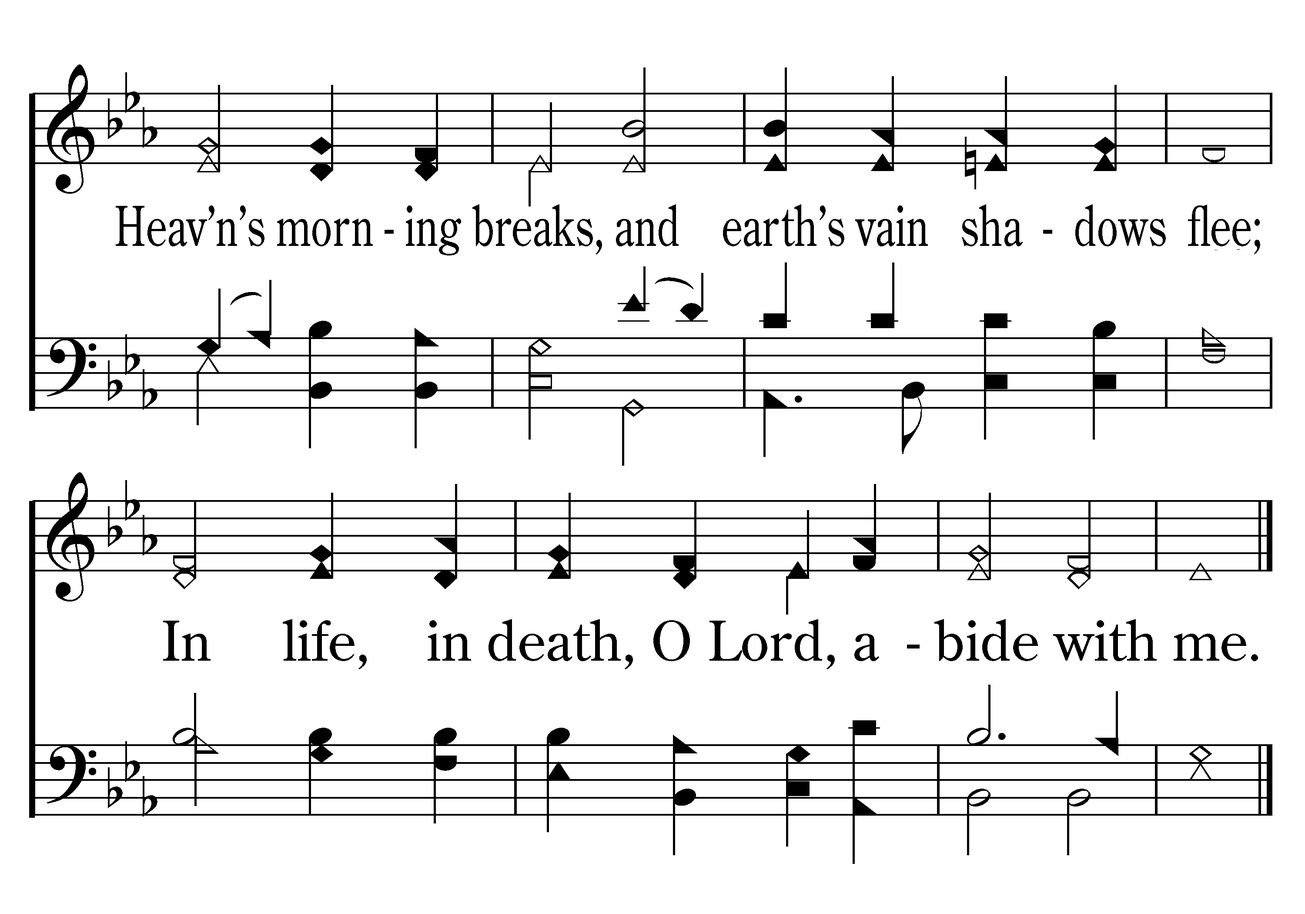
<style>
.page{position:relative;width:1305px;height:914px;background:#ffffff}
.page>*{position:absolute;margin:0}
.t1{font:54.4px "CenturyOldStyleStd-Regular";color:#000000;scale:0.76 1}
.t2{font:54.4px "CenturyOldStyleStd-Regular";color:#000000;scale:1.03 1}
</style>
<div class="page">
<p class="t1" style="left:116px;top:204px;width:1144px;height:51px">Heav’n’s morn - ing breaks, and    earth’s vain   sha  -  dows  flee;</p>
<p class="t2" style="left:163px;top:619px;width:1095px;height:50px">In     life,    in death, O Lord, a  - bide with me.</p>
</div>
